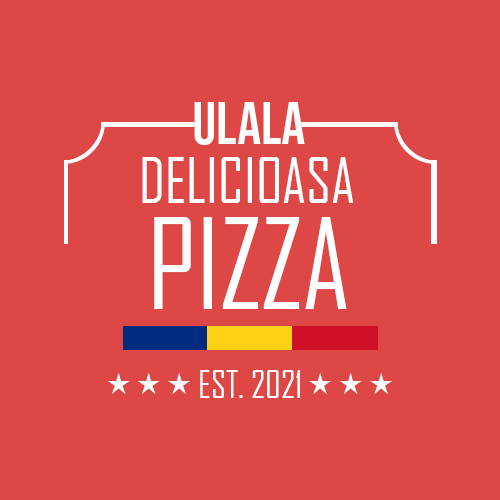
<style>
.page{position:relative;width:500px;height:500px;background:#dd4746}
.page>*{position:absolute;margin:0}
.t1{font:60px "AgencyFB-Reg";color:#ffffff}
.t2{font:120px "AgencyFB-Reg";color:#ffffff}
.t3{font:30px "PizzaDudeStars";letter-spacing:-0.1em;color:#ffffff}
.t4{font:36px "AgencyFB-Reg";color:#ffffff}
</style>
<div class="page">
<p class="t1" style="left:142px;top:157px;width:212px;height:46px">DELICIOASA</p>
<p class="t2" style="left:154px;top:217px;width:193px;height:92px">PIZZA</p>
<p class="t3" style="left:108px;top:373px;width:82px;height:21px">A A A</p>
<p class="t4" style="left:200px;top:370px;width:100px;height:28px">EST. 2021</p>
<p class="t3" style="left:309px;top:373px;width:83px;height:21px">A A A</p>
</div>
